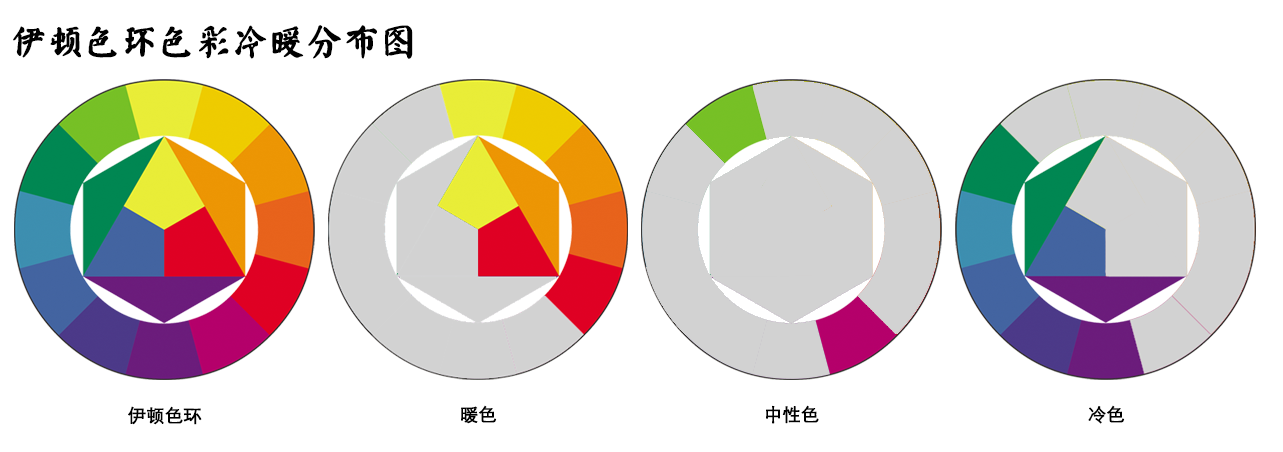
<style>
.page{position:relative;width:1283px;height:452px;background:#ffffff}
.page>*{position:absolute;margin:0}
.t1{font:36px "øów·»îów©I";color:#000000;font-weight:bold}
.t2{font:18px "STXihei";color:#000000;font-weight:bold}
</style>
<div class="page">
<p class="t1" style="left:13px;top:25px;width:400px;height:34px">伊顿色环色彩冷暖分布图</p>
<p class="t2" style="left:128px;top:406px;width:74px;height:19px">伊顿色环</p>
<p class="t2" style="left:461px;top:405px;width:36px;height:19px">暖色</p>
<p class="t2" style="left:766px;top:405px;width:53px;height:19px">中性色</p>
<p class="t2" style="left:1088px;top:405px;width:37px;height:19px">冷色</p>
</div>
